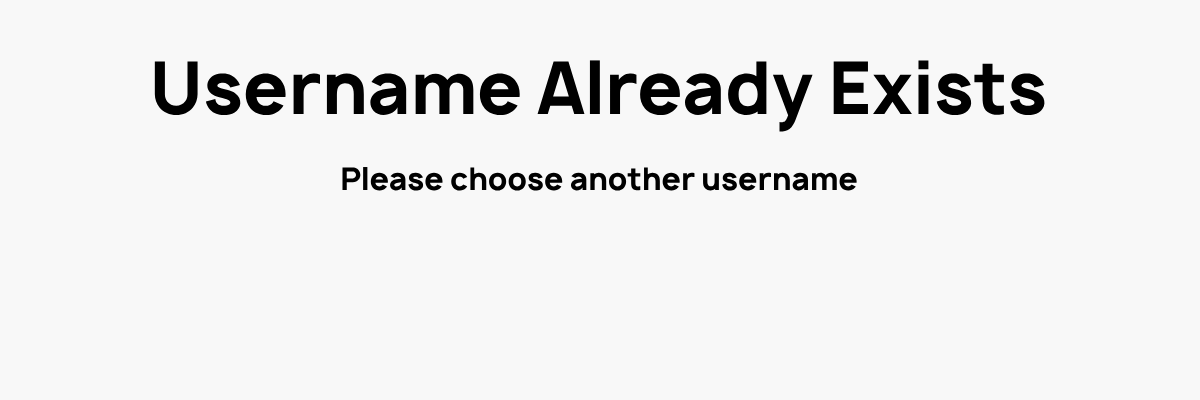
<style>
.page{position:relative;width:1200px;height:400px;background:#f8f8f8}
.page>*{position:absolute;margin:0}
.t1{font:70px "Manrope-Bold";color:#000000}
.t2{font:30px "Manrope-Bold";color:#000000}
</style>
<div class="page">
<p class="t1" style="left:154px;top:60px;width:891px;height:72px">Username Already Exists</p>
<p class="t2" style="left:342px;top:167px;width:515px;height:24px">Please choose another username</p>
</div>
